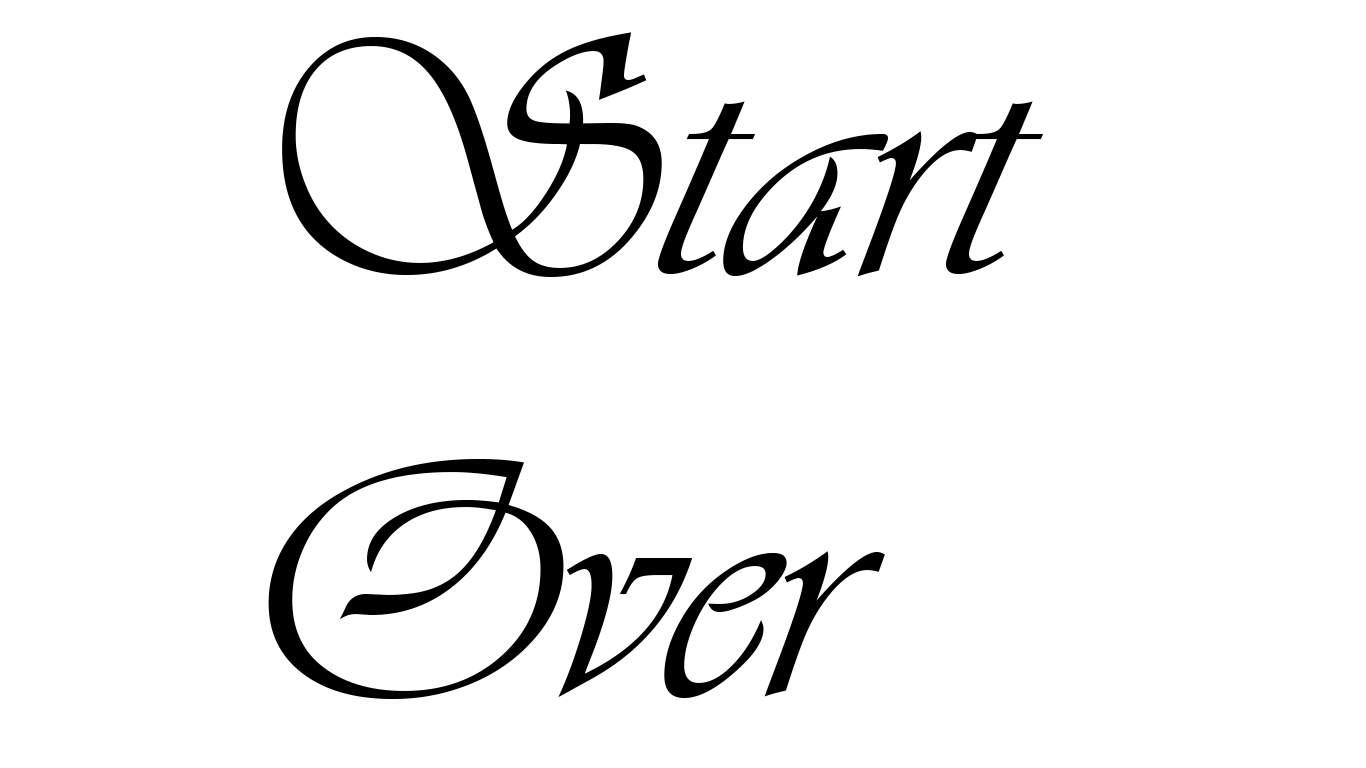
<style>
.page{position:relative;width:1366px;height:768px;background:#ffffff}
.page>*{position:absolute;margin:0}
.t1{font:350px "Vivaldii";color:#000000}
</style>
<div class="page">
<p class="t1" style="left:268px;top:32px;width:776px;height:667px">Start<br>Over</p>
</div>
